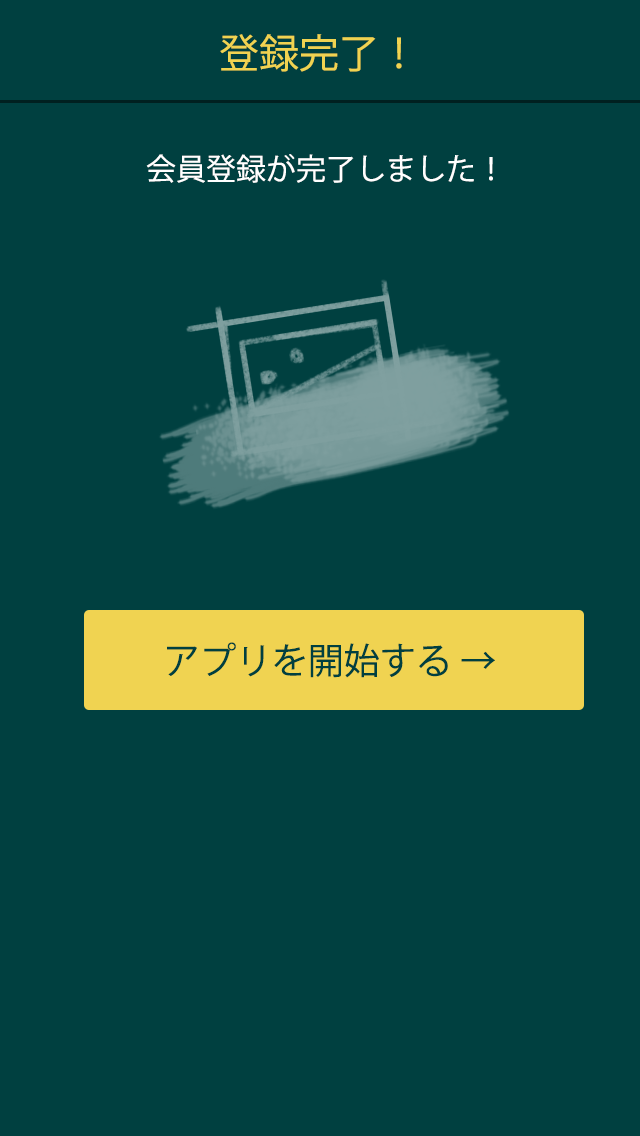
<style>
.page{position:relative;width:640px;height:1136px;background:#004040}
.page>*{position:absolute;margin:0}
.t1{font:40px "KozGoPr6N-Regular";color:#f0d351}
.t2{font:30px "KozGoPr6N-Regular";color:#ffffff}
.t3{font:36px "KozGoPr6N-Regular";color:#004040}
</style>
<div class="page">
<p class="t1" style="left:220px;top:34px;width:182px;height:38px">登録完了！</p>
<p class="t2" style="left:146px;top:154px;width:347px;height:29px">会員登録が完了しました！</p>
<p class="t3" style="left:167px;top:642px;width:328px;height:36px">アプリを開始する →</p>
</div>
